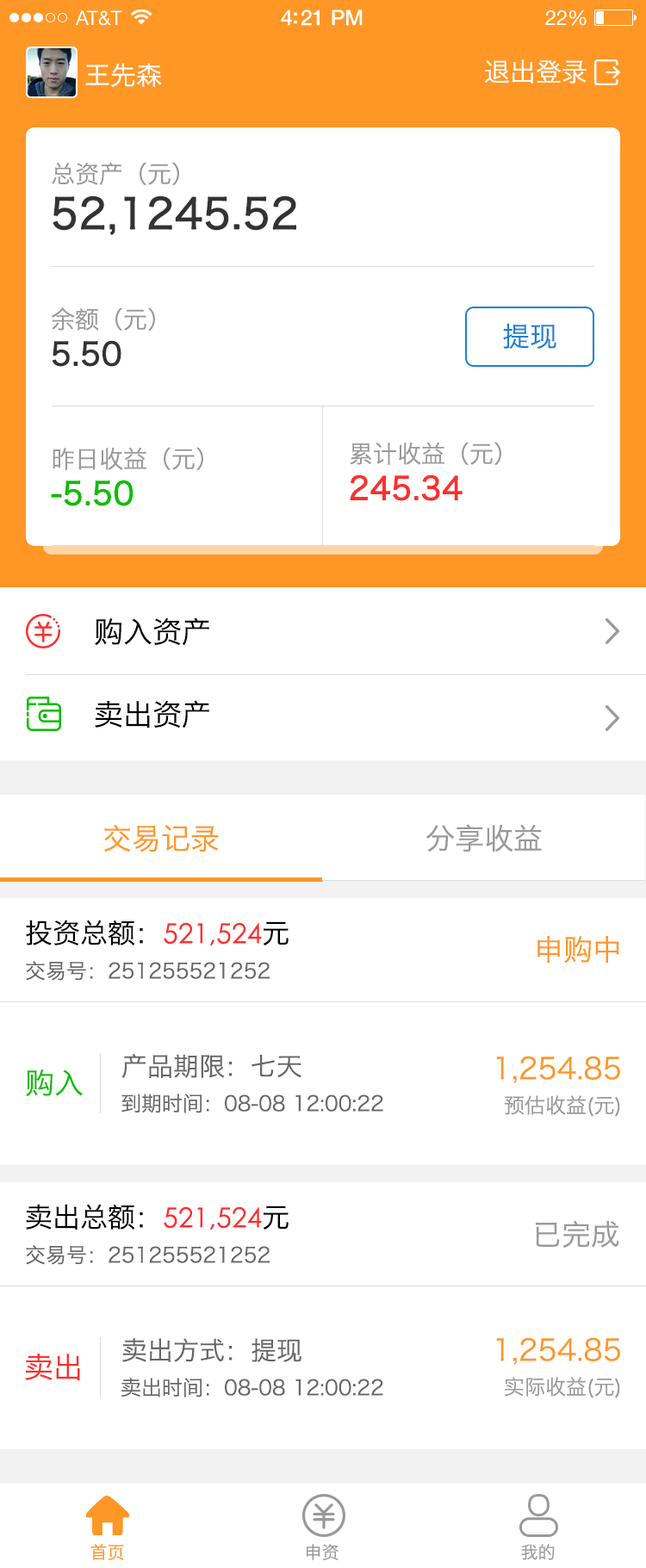
<style>
.page{position:relative;width:646px;height:1568px;background:#ffffff}
.page>*{position:absolute;margin:0}
.t1{font:25.8px "HiraginoSansGB-W3";color:#ffffff}
.t2{font:41.3px/31px "HiraginoSansGB-W3";color:#333333;font-weight:bold}
.t3{font:24.1px/31px "HiraginoSansGB-W3";color:#999999}
.t4{font:31px/31px "HiraginoSansGB-W3";color:#333333;font-weight:bold}
.t5{font:27.6px "HiraginoSansGB-W3";color:#1b82d2}
.t6{font:31px/31px "HiraginoSansGB-W3";color:#0dbe00;font-weight:bold}
.t7{font:31px/31px "HiraginoSansGB-W3";color:#ff2e2e;font-weight:bold}
.t8{font:29.3px "HiraginoSansGB-W3";color:#000000}
.t9{font:29.3px "HiraginoSansGB-W3";color:#ff9726}
.t10{font:29.3px "HiraginoSansGB-W3";color:#999999}
.t11{font:20.7px/51.7px "HiraginoSansGB-W3";color:#666666}
.t12{font:27.6px/41.3px "HiraginoSansGB-W3";color:#000000}
.t13{font:27.6px/41.3px "CenturyGothic";color:#ff2e2e}
.t14{font:25.8px "HiraginoSansGB-W3";color:#666666}
.t15{font:29.3px/41.3px "HiraginoSansGB-W3";color:#ff9726}
.t16{font:20.7px/41.3px "HiraginoSansGB-W3";color:#999999}
.t17{font:29.3px "HiraginoSansGB-W3";color:#0dbe00}
.t18{font:20.7px "HiraginoSansGB-W3";color:#666666}
.t19{font:29.3px "HiraginoSansGB-W3";color:#ff2e2e}
.t20{font:17.4px "HiraginoSansGB-W3";color:#ff9726}
.t21{font:17.4px "HiraginoSansGB-W3";color:#999999}
</style>
<div class="page">
<p class="t1" style="left:85px;top:63px;width:77px;height:24px">王先森</p>
<p class="t1" style="left:485px;top:59px;width:101px;height:25px">退出登录</p>
<p class="t2" style="left:52px;top:162px;width:244px;height:73px"><span class="t3">总资产（元）<br></span>52,1245.52</p>
<p class="t3" style="left:52px;top:307px;width:103px;height:60px">余额（元）<br><span class="t4">5.50</span></p>
<p class="t5" style="left:503px;top:323px;width:53px;height:26px">提现</p>
<p class="t3" style="left:51px;top:447px;width:152px;height:59px">昨日收益（元）<br><span class="t6">-5.50</span></p>
<p class="t3" style="left:350px;top:442px;width:151px;height:59px">累计收益（元）<br><span class="t7">245.34</span></p>
<p class="t8" style="left:95px;top:617px;width:114px;height:29px">购入资产</p>
<p class="t8" style="left:95px;top:700px;width:114px;height:28px">卖出资产</p>
<p class="t9" style="left:104px;top:824px;width:115px;height:28px">交易记录</p>
<p class="t10" style="left:426px;top:824px;width:116px;height:28px">分享收益</p>
<p class="t11" style="left:26px;top:920px;width:262px;height:61px"><span class="t12">投资总额：</span><span class="t13">521,524</span><span class="t12">元<br></span>交易号：251255521252</p>
<p class="t9" style="left:537px;top:936px;width:82px;height:28px">申购中</p>
<p class="t14" style="left:122px;top:1053px;width:179px;height:25px">产品期限：七天</p>
<p class="t15" style="left:496px;top:1056px;width:124px;height:61px;text-align:right">1,254.85<br><span class="t16">预估收益(元)</span></p>
<p class="t17" style="left:26px;top:1069px;width:57px;height:28px">购入</p>
<p class="t18" style="left:121px;top:1094px;width:262px;height:19px">到期时间：08-08 12:00:22</p>
<p class="t11" style="left:26px;top:1204px;width:262px;height:61px"><span class="t12">卖出总额：</span><span class="t13">521,524</span><span class="t12">元<br></span>交易号：251255521252</p>
<p class="t10" style="left:536px;top:1220px;width:83px;height:28px">已完成</p>
<p class="t15" style="left:496px;top:1337px;width:124px;height:61px;text-align:right">1,254.85<br><span class="t16">实际收益(元)</span></p>
<p class="t14" style="left:122px;top:1338px;width:179px;height:24px">卖出方式：提现</p>
<p class="t19" style="left:25px;top:1354px;width:55px;height:27px">卖出</p>
<p class="t18" style="left:121px;top:1378px;width:262px;height:20px">卖出时间：08-08 12:00:22</p>
<p class="t20" style="left:90px;top:1544px;width:34px;height:16px">首页</p>
<p class="t21" style="left:307px;top:1544px;width:31px;height:16px">申资</p>
<p class="t21" style="left:521px;top:1544px;width:34px;height:16px">我的</p>
</div>
